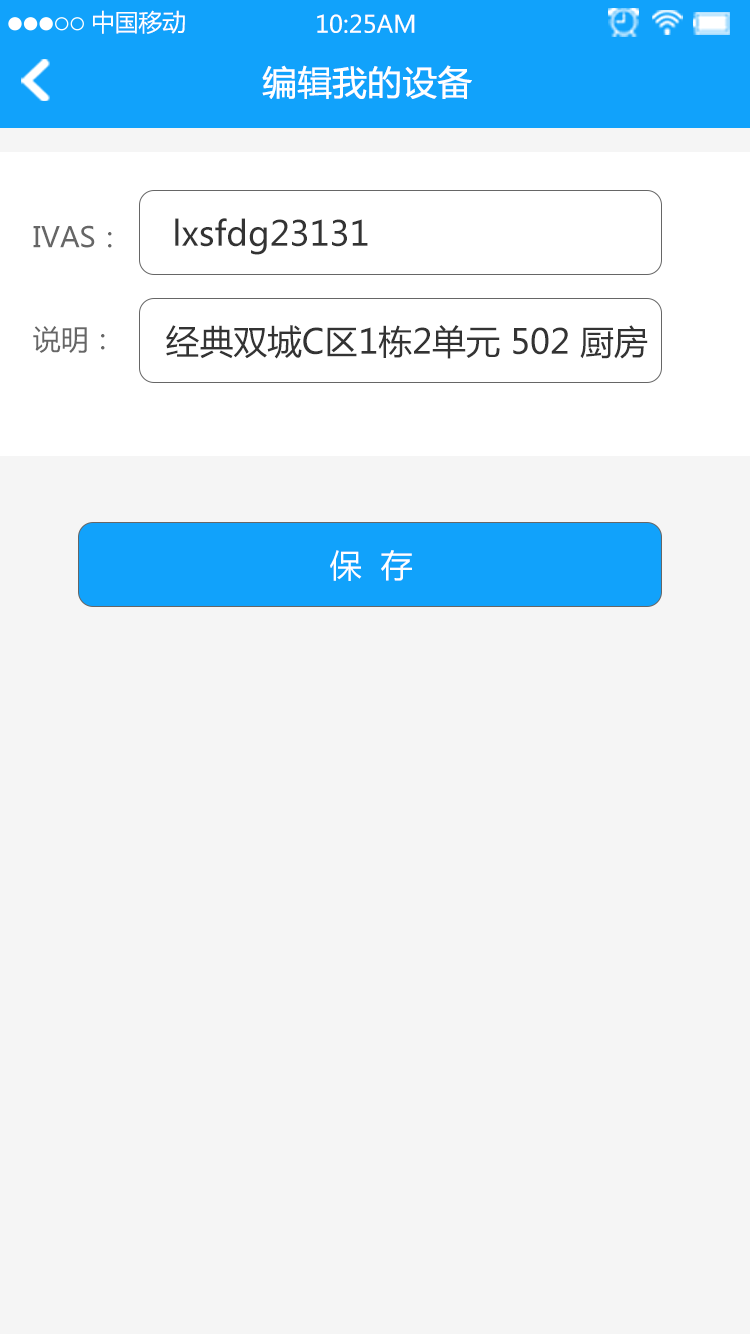
<style>
.page{position:relative;width:750px;height:1334px;background:#f5f5f5}
.page>*{position:absolute;margin:0}
.t1{font:23.7px "MicrosoftYaHei";color:#ffffff}
.t2{font:34px "MicrosoftYaHei";color:#ffffff;font-weight:bold}
.t3{font:34px "MicrosoftYaHei";color:#333333}
.t4{font:28px/51px "MicrosoftYaHei";color:#666666}
.t5{font:32px "MicrosoftYaHei";color:#ffffff}
</style>
<div class="page">
<p class="t1" style="left:93px;top:10px;width:92px;height:24px">中国移动</p>
<p class="t1" style="left:317px;top:14px;width:98px;height:19px">10:25AM</p>
<p class="t2" style="left:262px;top:65px;width:210px;height:34px">编辑我的设备</p>
<p class="t3" style="left:175px;top:218px;width:193px;height:37px">lxsfdg23131</p>
<p class="t4" style="left:33px;top:225px;width:79px;height:128px">IVAS：<br><br>说明：</p>
<p class="t3" style="left:166px;top:325px;width:482px;height:34px">经典双城C区1栋2单元 502 厨房</p>
<p class="t5" style="left:330px;top:550px;width:82px;height:31px">保  存</p>
</div>
